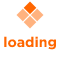
<style>
.page{position:relative;width:60px;height:60px;background:#ffffff}
.page>*{position:absolute;margin:0}
.t1{font:14px "Gotham-Bold";color:#ff6600}
</style>
<div class="page">
<p class="t1" style="left:4px;top:36px;width:52px;height:14px">loading</p>
</div>
